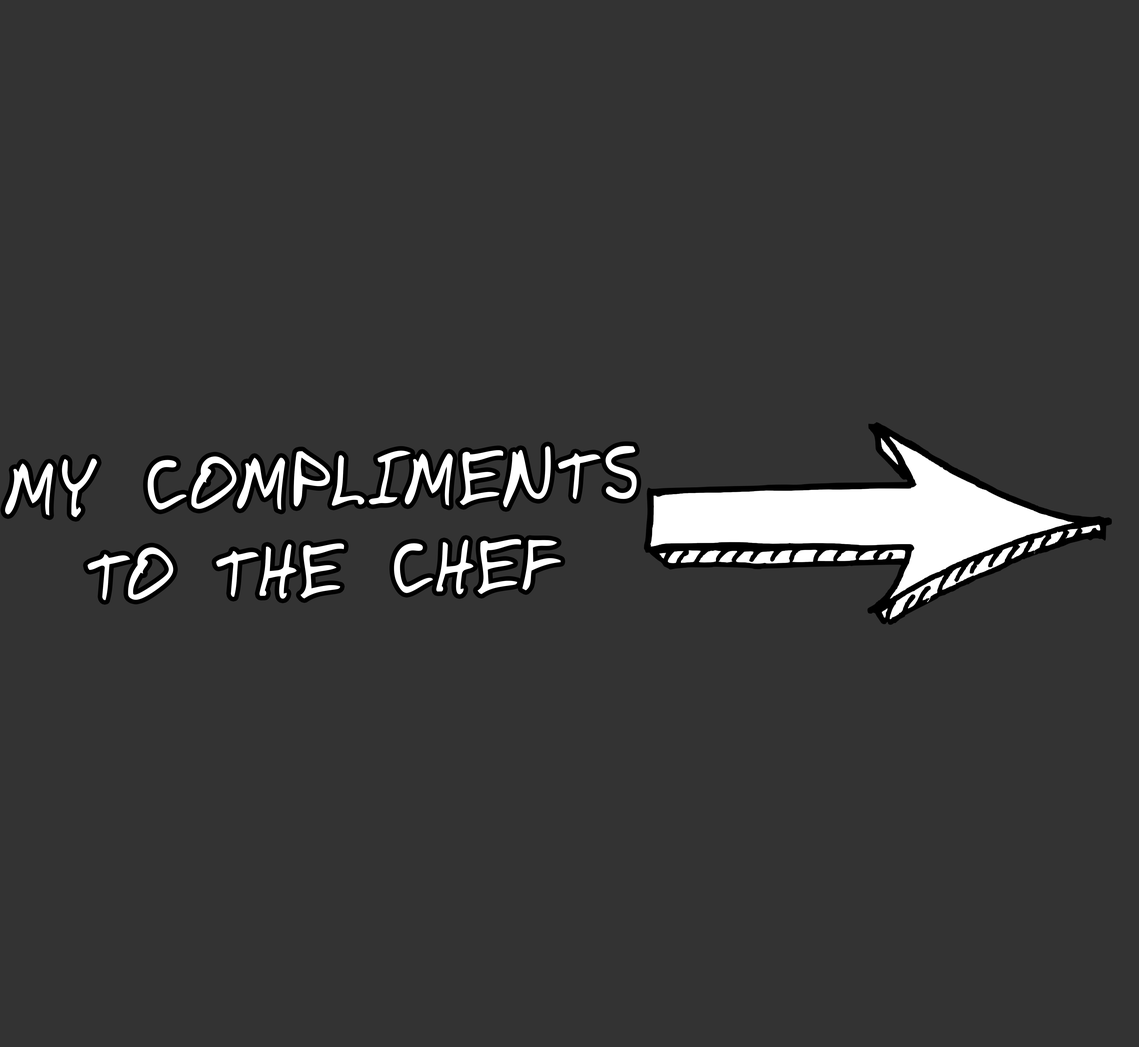
<style>
.page{position:relative;width:1139px;height:1047px;background:#333333}
.page>*{position:absolute;margin:0}
.t1{font:74.5px "DomesticManners";letter-spacing:0.04em;color:#ffffff}
</style>
<div class="page">
<p class="t1" style="left:5px;top:446px;width:632px;height:154px;text-align:center;rotate:-1deg">MY COMPLIMENTS<br>TO THE CHEF</p>
</div>
